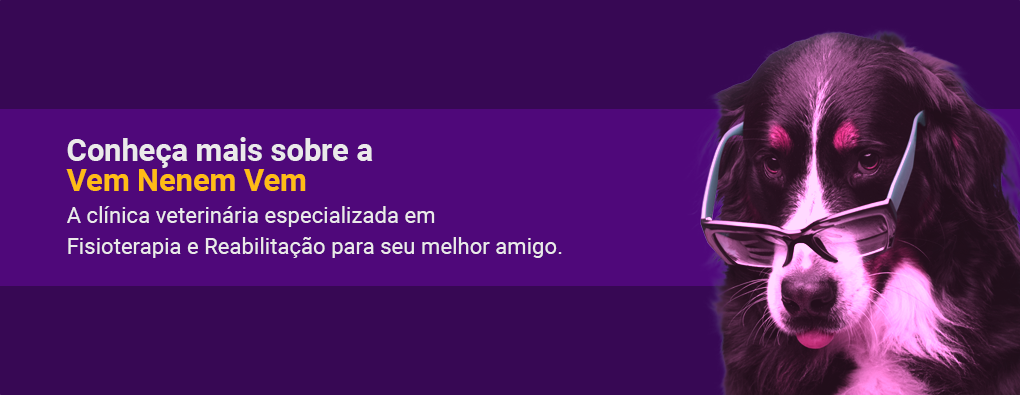
<style>
.page{position:relative;width:1020px;height:395px;background:#370854}
.page>*{position:absolute;margin:0}
.t1{font:30.8px/30.8px "Roboto-Bold";color:#ebeaea}
.t2{font:30.8px/30.8px "Roboto-Bold";color:#ffbc15}
.t3{font:22.2px/30.8px "Roboto-Regular";color:#ebeaea}
</style>
<div class="page">
<p class="t1" style="left:66px;top:137px;width:307px;height:54px">Conheça mais sobre a<br><span class="t2">Vem Nenem Vem</span></p>
<p class="t3" style="left:67px;top:206px;width:495px;height:52px">A clínica veterinária especializada em<br>Fisioterapia e Reabilitação para seu melhor amigo.</p>
</div>
